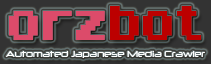
<style>
.page{position:relative;width:211px;height:64px}
.page>*{position:absolute;margin:0}
.t1{font:48px "Arcadepix";color:#dc4b6a}
.t2{font:48px "Arcadepix";color:#bc0000}
.t3{font:10px "Neuropol";color:#ffffff}
</style>
<div class="page">
<p class="t1" style="left:9px;top:6px;width:192px;height:34px">orz<span class="t2">bot</span></p>
<p class="t3" style="left:6px;top:51px;width:199px;height:7px">Automated Japanese Media Crawler</p>
</div>
